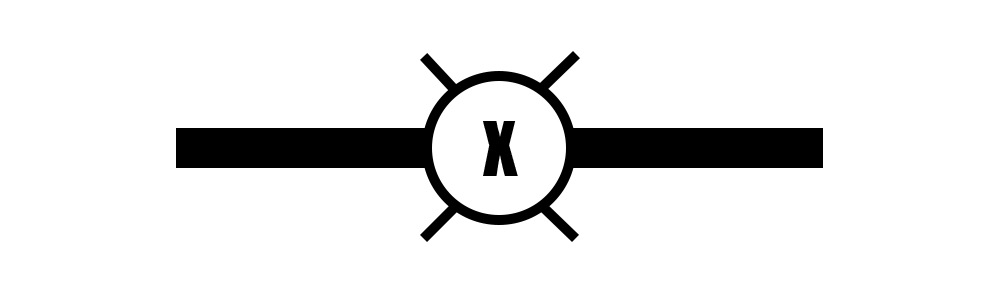
<style>
.page{position:relative;width:1000px;height:300px;background:#ffffff}
.page>*{position:absolute;margin:0}
.t1{font:70px "Impact";color:#000000}
</style>
<div class="page">
<p class="t1" style="left:483px;top:121px;width:35px;height:55px">X</p>
</div>
